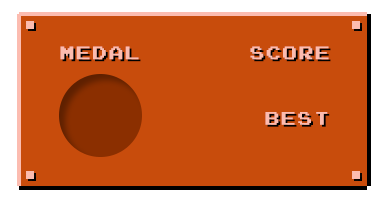
<style>
.page{position:relative;width:388px;height:204px;background:#c84c0c}
.page>*{position:absolute;margin:0}
.t1{font:14.6px "Emulogic";letter-spacing:0.12em;color:#fcbcb0}
.t2{font:14.6px "Emulogic";letter-spacing:0.12em}
</style>
<div class="page">
<p class="t1" style="left:60px;top:46px;width:79px;height:14px">Medal</p>
<p class="t2" style="left:62px;top:48px;width:79px;height:14px">Medal</p>
<p class="t1" style="left:250px;top:46px;width:79px;height:14px">Score</p>
<p class="t2" style="left:252px;top:48px;width:79px;height:14px">Score</p>
<p class="t1" style="left:265px;top:112px;width:63px;height:13px">Best</p>
<p class="t2" style="left:267px;top:114px;width:63px;height:13px">Best</p>
</div>
